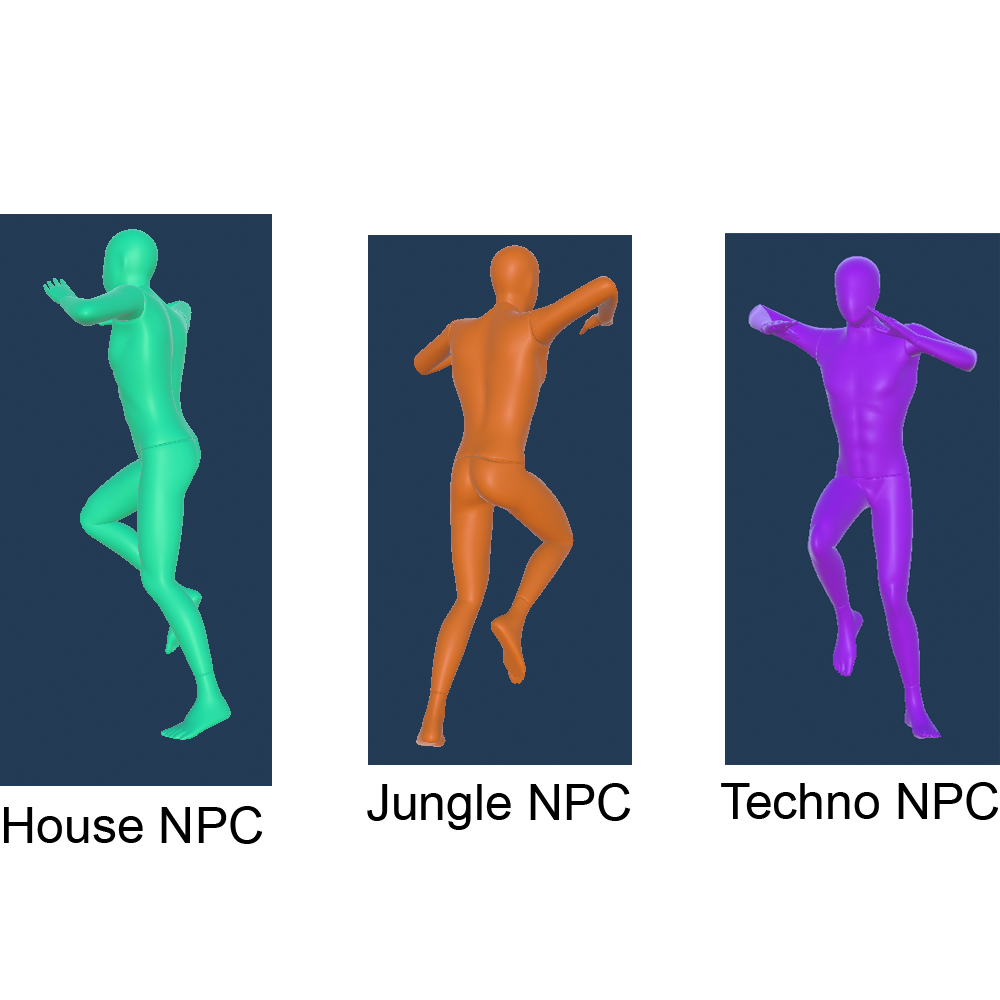
<style>
.page{position:relative;width:1000px;height:1000px;background:#ffffff}
.page>*{position:absolute;margin:0}
.t1{font:50px "ArialMT";color:#000000}
</style>
<div class="page">
<p class="t1" style="left:367px;top:783px;width:264px;height:47px">Jungle NPC</p>
<p class="t1" style="left:721px;top:782px;width:278px;height:38px">Techno NPC</p>
<p class="t1" style="left:4px;top:806px;width:259px;height:38px">House NPC</p>
</div>
